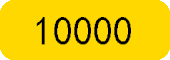
<style>
.page{position:relative;width:170px;height:60px;background:#ffd800}
.page>*{position:absolute;margin:0}
.t1{font:40px "¿¬Ìå";color:#000000}
</style>
<div class="page">
<p class="t1" style="left:36px;top:17px;width:95px;height:28px">10000</p>
</div>
